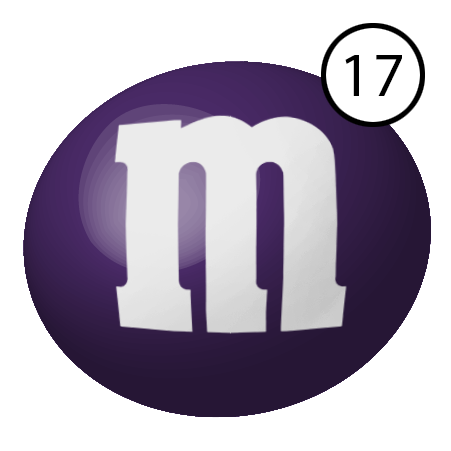
<style>
.page{position:relative;width:451px;height:451px;background:#ffffff}
.page>*{position:absolute;margin:0}
.t1{font:62.5px "MyriadPro-Regular";letter-spacing:0.02em;color:#000000}
</style>
<div class="page">
<p class="t1" style="left:345px;top:55px;width:57px;height:41px">17</p>
</div>
